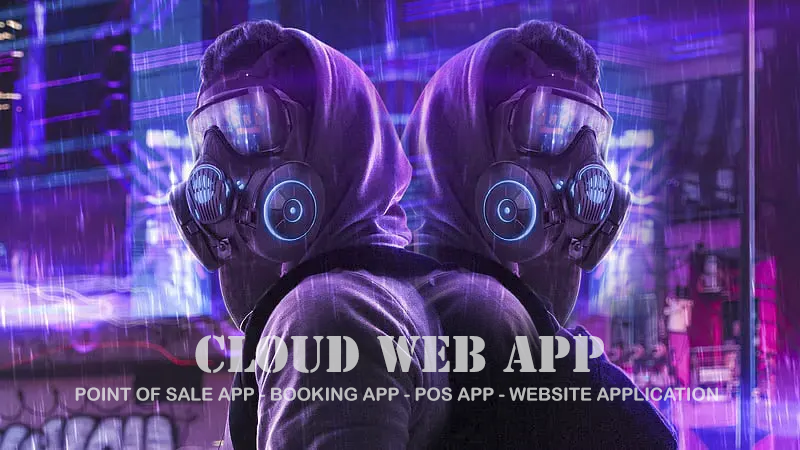
<style>
.page{position:relative;width:800px;height:450px}
.page>*{position:absolute;margin:0}
.t1{font:48px "StencilStd";color:#bdbcbf}
.t2{font:18px "ArialRoundedMTBold";color:#bdbcc0}
</style>
<div class="page">
<p class="t1" style="left:195px;top:335px;width:409px;height:38px">CLOUD WEB APP</p>
<p class="t2" style="left:75px;top:387px;width:643px;height:14px">POINT OF SALE APP - BOOKING APP - POS APP - WEBSITE APPLICATION</p>
</div>
